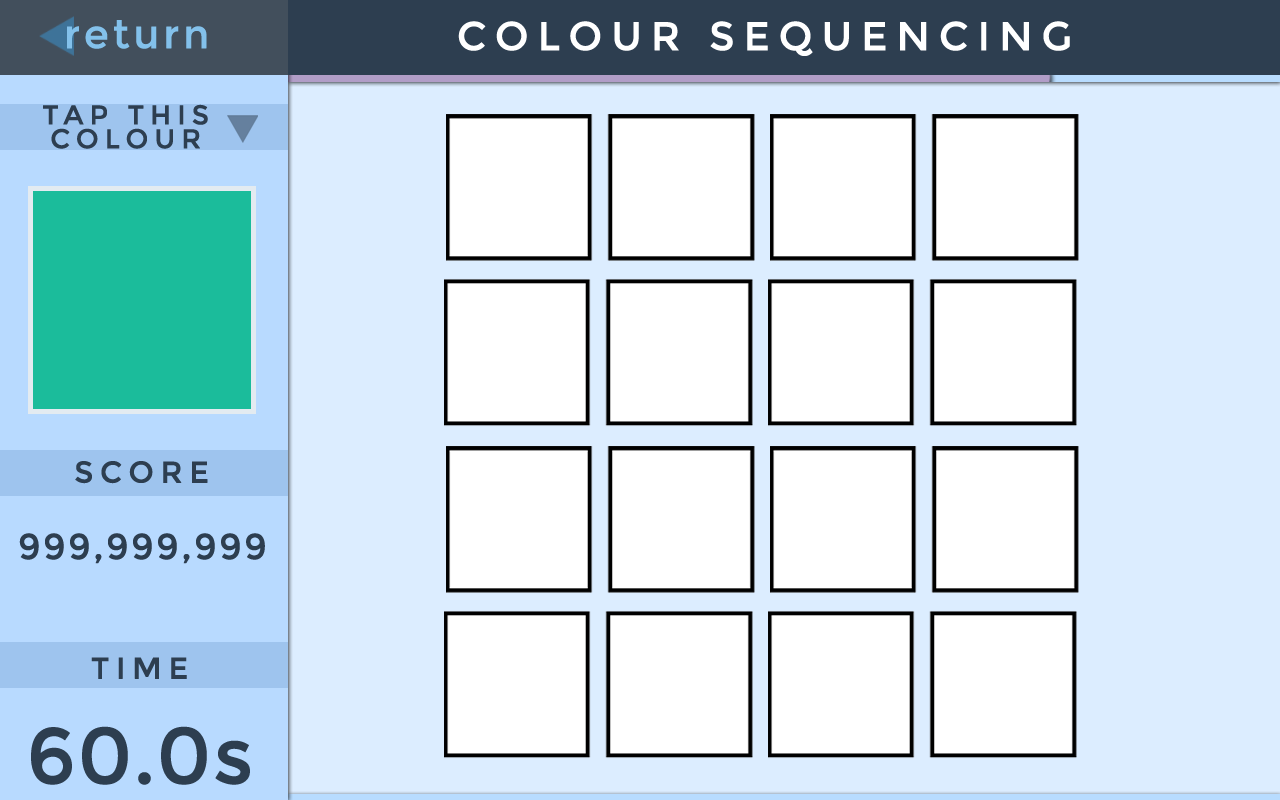
<style>
.page{position:relative;width:1280px;height:800px;background:#dcedff}
.page>*{position:absolute;margin:0}
.t1{font:40px "Montserrat-Regular";letter-spacing:0.075em;color:#83c1eb;font-weight:bold}
.t2{font:40px "Montserrat-Regular";letter-spacing:0.2em;color:#ffffff;text-transform:uppercase;font-weight:bold}
.t3{font:27px/23.9px "Montserrat-Regular";letter-spacing:0.2em;color:#2d3e50;text-transform:uppercase;font-weight:bold}
.t4{font:30px "Montserrat-Regular";letter-spacing:0.2em;color:#2d3e50;font-weight:bold}
.t5{font:36px "Montserrat-Regular";letter-spacing:0.05em;color:#2d3e50;font-weight:bold}
.t6{font:79px "Montserrat-Regular";color:#2d3e50;text-transform:uppercase;font-weight:bold}
.t7{font:79px "Montserrat-Regular";color:#2d3e50;font-weight:bold}
</style>
<div class="page">
<p class="t1" style="left:67px;top:20px;width:140px;height:29px">return</p>
<p class="t2" style="left:458px;top:21px;width:612px;height:35px">Colour Sequencing</p>
<p class="t3" style="left:43px;top:104px;width:165px;height:45px;text-align:center">Tap This <br>colour</p>
<p class="t4" style="left:75px;top:461px;width:133px;height:23px">SCORE</p>
<p class="t5" style="left:19px;top:533px;width:246px;height:31px">999,999,999</p>
<p class="t4" style="left:91px;top:657px;width:96px;height:22px">TIME</p>
<p class="t6" style="left:31px;top:726px;width:219px;height:59px">60.0<span class="t7">s</span></p>
</div>
